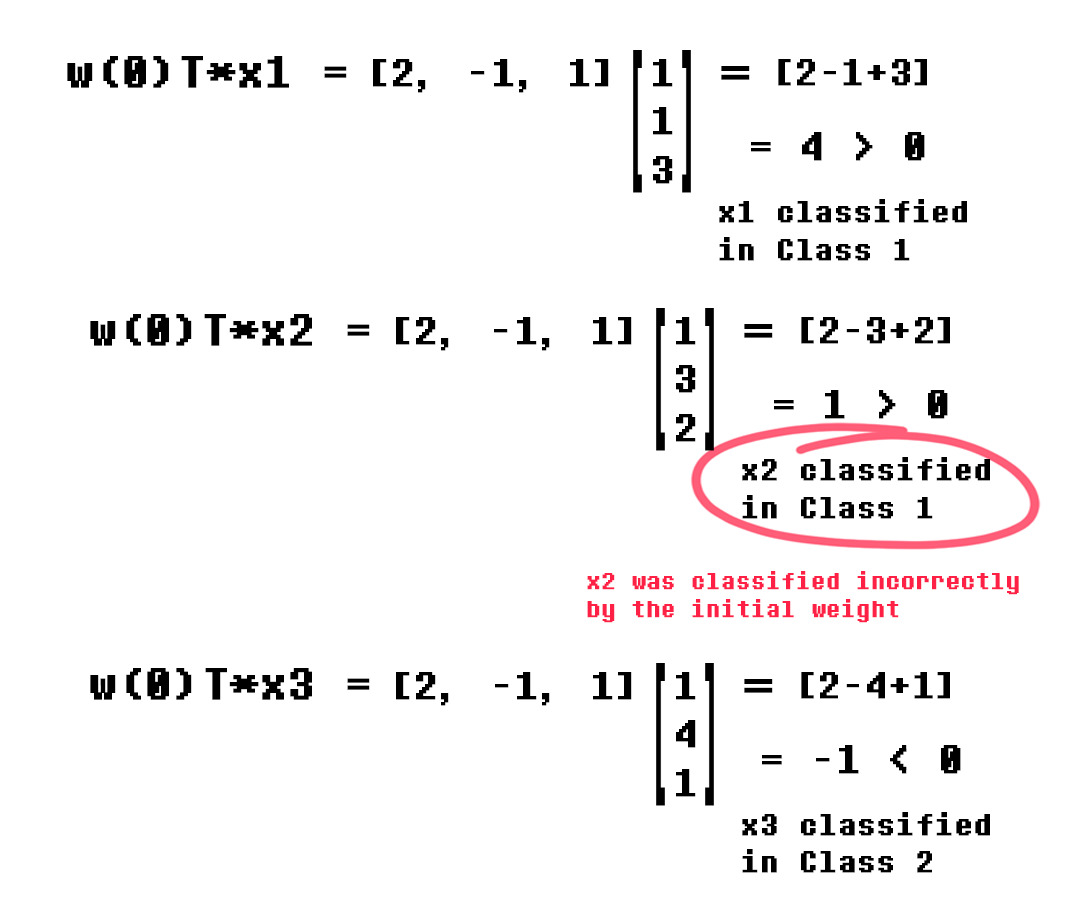
<style>
.page{position:relative;width:1080px;height:922px;background:#ffffff}
.page>*{position:absolute;margin:0}
.t1{font:45.5px "DeterminationMono";color:#000000;font-weight:bold}
.t2{font:40.4px "DeterminationMono";color:#000000;font-weight:bold}
.t3{font:37.8px "DeterminationMono";color:#000000;font-weight:bold}
.t4{font:58.1px "DeterminationMono";color:#000000;font-weight:bold}
.t5{font:41px "DeterminationMono";color:#000000;font-weight:bold}
.t6{font:31px "DeterminationMono";color:#000000;font-weight:bold}
.t7{font:23.9px "DeterminationMono";color:#ff2045;font-weight:bold}
</style>
<div class="page">
<p class="t1" style="left:67px;top:56px;width:280px;height:32px">w(0)T*x1 =</p>
<p class="t2" style="left:373px;top:59px;width:236px;height:34px">[2, -1, 1]</p>
<p class="t2" style="left:653px;top:59px;width:20px;height:125px">1<br> 1<br> 3</p>
<p class="t3" style="left:778px;top:59px;width:149px;height:27px">[2-1+3]</p>
<p class="t4" style="left:721px;top:66px;width:29px;height:14px">=</p>
<p class="t5" style="left:751px;top:132px;width:174px;height:29px">= 4 &gt; 0</p>
<p class="t6" style="left:719px;top:199px;width:248px;height:62px">x1 classified <br>in Class 1</p>
<p class="t1" style="left:90px;top:314px;width:280px;height:32px">w(0)T*x2 =</p>
<p class="t2" style="left:396px;top:317px;width:236px;height:34px">[2, -1, 1]</p>
<p class="t2" style="left:676px;top:317px;width:20px;height:125px">1<br> 3<br> 2</p>
<p class="t3" style="left:801px;top:317px;width:149px;height:27px">[2-3+2]</p>
<p class="t4" style="left:744px;top:324px;width:29px;height:14px">=</p>
<p class="t5" style="left:774px;top:390px;width:174px;height:29px">= 1 &gt; 0</p>
<p class="t6" style="left:742px;top:457px;width:248px;height:62px">x2 classified <br>in Class 1</p>
<p class="t7" style="left:587px;top:571px;width:432px;height:52px">x2 was classified incorrectly<br>by the initial weight</p>
<p class="t1" style="left:90px;top:668px;width:280px;height:32px">w(0)T*x3 =</p>
<p class="t2" style="left:396px;top:672px;width:236px;height:34px">[2, -1, 1]</p>
<p class="t2" style="left:676px;top:672px;width:20px;height:125px">1<br> 4<br> 1</p>
<p class="t3" style="left:801px;top:672px;width:149px;height:27px">[2-4+1]</p>
<p class="t4" style="left:744px;top:679px;width:29px;height:14px">=</p>
<p class="t5" style="left:762px;top:745px;width:199px;height:29px">= -1 &lt; 0</p>
<p class="t6" style="left:742px;top:812px;width:248px;height:61px">x3 classified <br>in Class 2</p>
</div>
